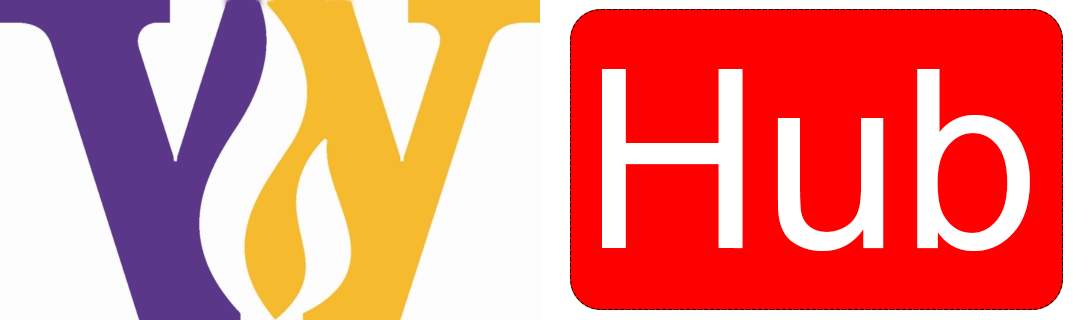
<style>
.page{position:relative;width:1080px;height:320px;background:#ff0000}
.page>*{position:absolute;margin:0}
.t1{font:250px "ArialMT";color:#ffffff}
</style>
<div class="page">
<p class="t1" style="left:602px;top:69px;width:428px;height:182px">Hub</p>
</div>
